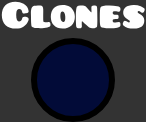
<style>
.page{position:relative;width:146px;height:122px;background:#333333}
.page>*{position:absolute;margin:0}
.t1{font:40px "Pusab";color:#ffffff}
</style>
<div class="page">
<p class="t1" style="left:1px;top:1px;width:144px;height:28px">Clones</p>
</div>
